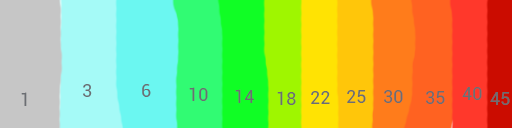
<style>
.page{position:relative;width:512px;height:128px}
.page>*{position:absolute;margin:0}
.t1{font:18px "Roboto-Regular";color:#6b6e73}
</style>
<div class="page">
<p class="t1" style="left:83px;top:84px;width:9px;height:13px">3</p>
<p class="t1" style="left:142px;top:84px;width:9px;height:13px">6</p>
<p class="t1" style="left:189px;top:87px;width:19px;height:14px">10</p>
<p class="t1" style="left:235px;top:89px;width:19px;height:14px">14</p>
<p class="t1" style="left:462px;top:87px;width:20px;height:13px">40</p>
<p class="t1" style="left:21px;top:92px;width:6px;height:14px">1</p>
<p class="t1" style="left:277px;top:91px;width:19px;height:14px">18</p>
<p class="t1" style="left:311px;top:91px;width:19px;height:13px">22</p>
<p class="t1" style="left:347px;top:90px;width:19px;height:13px">25</p>
<p class="t1" style="left:384px;top:90px;width:19px;height:13px">30</p>
<p class="t1" style="left:426px;top:91px;width:19px;height:13px">35</p>
<p class="t1" style="left:490px;top:92px;width:20px;height:13px">45</p>
</div>
